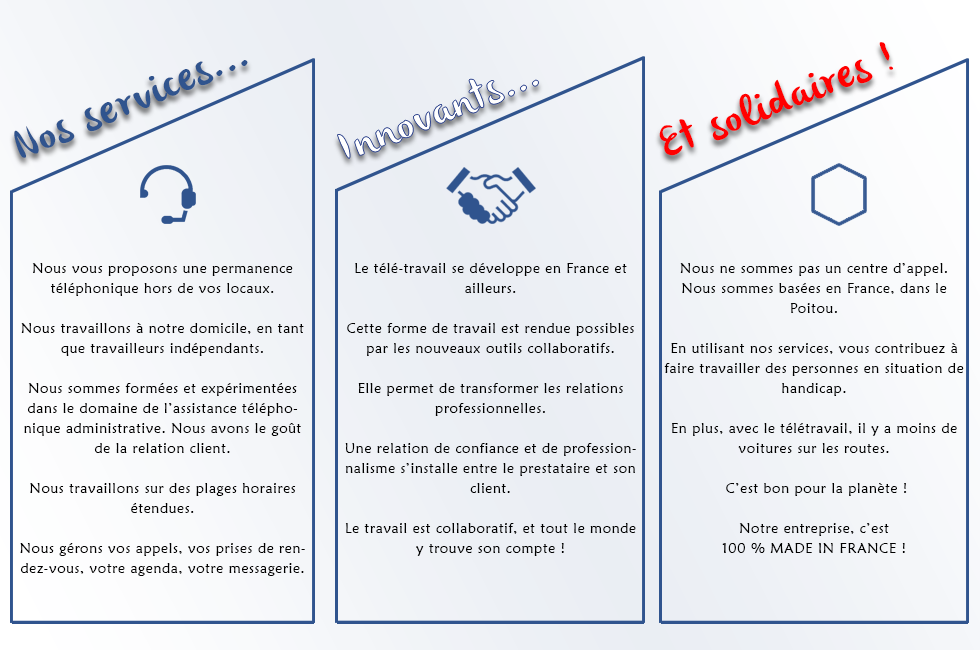
<style>
.page{position:relative;width:980px;height:650px}
.page>*{position:absolute;margin:0}
.t1{font:42px "olivier";letter-spacing:0.05em;color:#ff0000}
.t2{font:42px "olivier";letter-spacing:0.05em;color:#30548e}
.t3{font:14px/20px "MaiandraGD-Regular";letter-spacing:0.05em;color:#010000}
.t4{font:14px/1.9px "MaiandraGD-Regular";letter-spacing:0.05em;color:#010000}
.t5{font:14px/20px "MaiandraGD-Regular";letter-spacing:0.05em;color:#000000}
</style>
<div class="page">
<p class="t1" style="left:659px;top:42px;width:234px;height:114px;rotate:-22deg">Et solidaires !</p>
<p class="t2" style="left:14px;top:60px;width:234px;height:98px;rotate:-23deg">Nos services...</p>
<p class="t3" style="left:20px;top:263px;width:285px;height:313px;text-align:center"><span class="t4">Nous vous proposons une permanence </span>téléphonique hors de vos locaux. <br><br>Nous travaillons à notre domicile, en tant que travailleurs indépendants.<br><br>Nous sommes formées et expérimentées dans le domaine de l’assistance téléphonique administrative. Nous avons le goût de la relation client. <br><br>Nous travaillons sur des plages horaires étendues.<br><br>Nous gérons vos appels, vos prises de rendez-vous, votre agenda, votre messagerie.</p>
<p class="t5" style="left:345px;top:263px;width:291px;height:293px;text-align:center">Le télé-travail se développe en France et ailleurs.<br><br>Cette forme de travail est rendue possibles par les nouveaux outils collaboratifs.<br><br>Elle permet de transformer les relations professionnelles.<br><br>Une relation de confiance et de professionnalisme s’installe entre le prestataire et son client. <br><br>Le travail est collaboratif, et tout le monde y trouve son compte !</p>
<p class="t5" style="left:664px;top:263px;width:300px;height:290px;text-align:center">Nous ne sommes pas un centre d’appel. Nous sommes basées en France, dans le Poitou.<br><br>En utilisant nos services, vous contribuez à faire travailler des personnes en situation de handicap.<br><br>En plus, avec le télétravail, il y a moins de voitures sur les routes.<br><br> C’est bon pour la planète !<br><br>Notre entreprise, c’est <br>100 % MADE IN FRANCE !</p>
</div>
